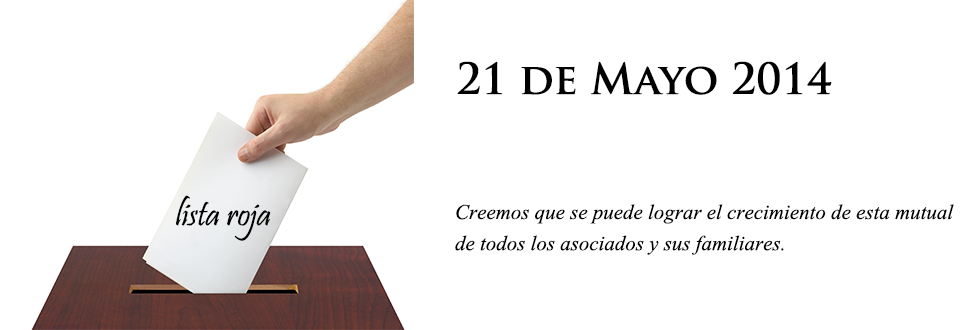
<style>
.page{position:relative;width:967px;height:330px;background:#ffffff}
.page>*{position:absolute;margin:0}
.t1{font:42px "TrajanPro-Bold";color:#000000}
.t2{font:36px "Pristina-Regular";color:#000101}
.t3{font:26px "Vijaya";color:#000000}
</style>
<div class="page">
<p class="t1" style="left:457px;top:61px;width:375px;height:34px">21 de Mayo 2014</p>
<p class="t2" style="left:176px;top:195px;width:95px;height:46px">lista roja</p>
<p class="t3" style="left:455px;top:204px;width:499px;height:51px">Creemos que se puede lograr el crecimiento de esta mutual<br>de todos los asociados y sus familiares.</p>
</div>
